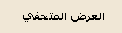
<style>
.page{position:relative;width:122px;height:33px;background:#f0e7d6}
.page>*{position:absolute;margin:0}
.t1{font:11px "Tahoma-Bold";color:#000000}
</style>
<div class="page">
<p class="t1" style="left:23px;top:12px;width:81px;height:10px">العرض المتحفي</p>
</div>
